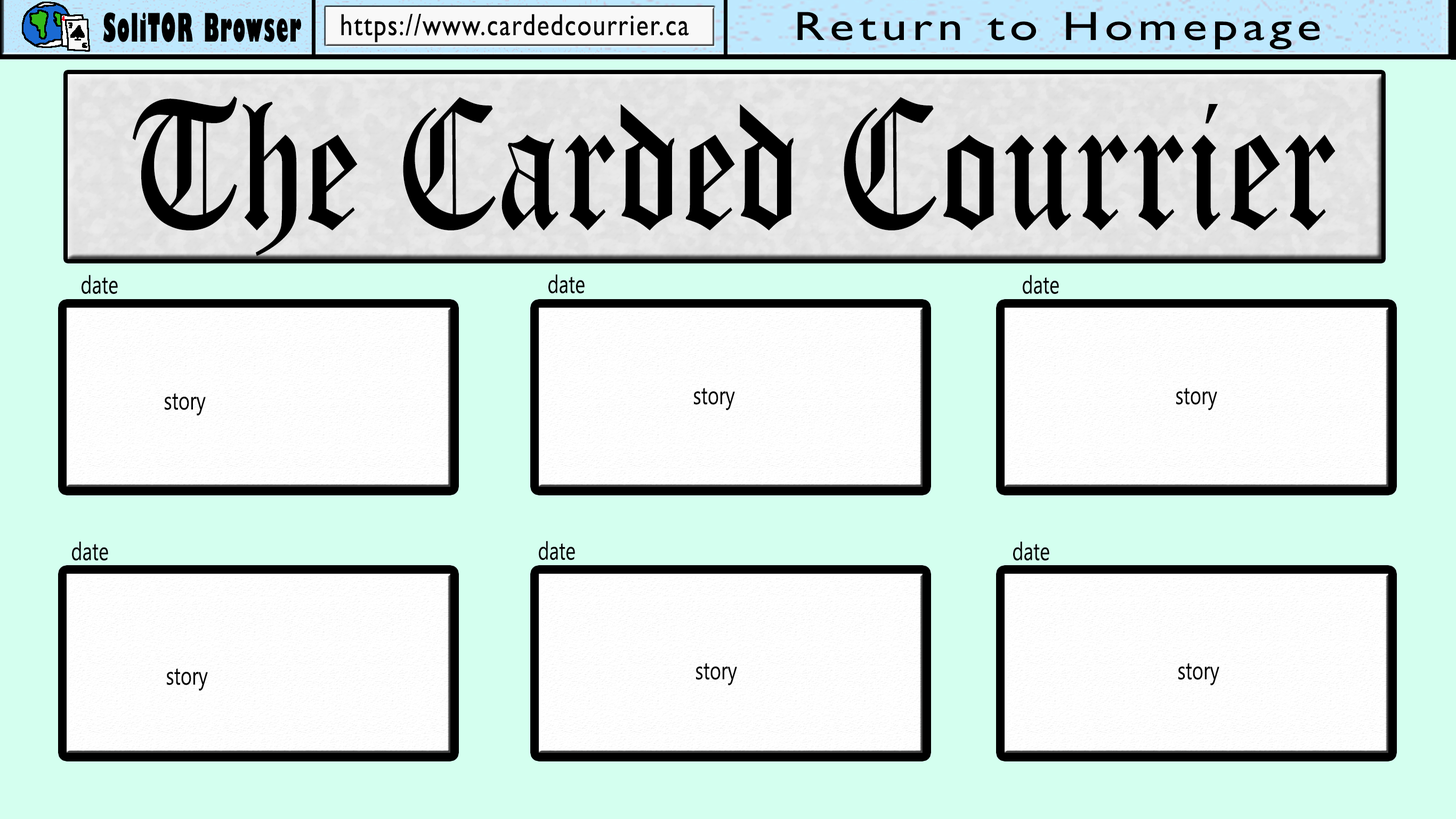
<style>
.page{position:relative;width:1456px;height:819px;background:#d4ffef}
.page>*{position:absolute;margin:0}
.t1{font:38.4px "GillSans-UltraBoldCondensed";letter-spacing:0.05em;color:#000000;scale:0.67 1}
.t2{font:30.7px "GillSansMT";letter-spacing:0.05em;color:#000000;scale:0.83 1}
.t3{font:40.9px "GillSansMT";letter-spacing:0.1em;color:#000000;scale:1.25 1}
.t4{font:183.6px "OldEnglishTextMT";color:#000000;scale:0.77 1}
.t5{font:24.9px "Ebrima";color:#000000;scale:0.77 1}
</style>
<div class="page">
<p class="t1" style="left:103px;top:12px;width:198px;height:30px">SoliTOR Browser</p>
<p class="t2" style="left:341px;top:14px;width:348px;height:29px">https://www.cardedcourrier.ca</p>
<p class="t3" style="left:797px;top:12px;width:523px;height:38px">Return to Homepage</p>
<p class="t4" style="left:132px;top:96px;width:1204px;height:160px">The Carded Courrier</p>
<p class="t5" style="left:82px;top:275px;width:36px;height:19px">date</p>
<p class="t5" style="left:549px;top:274px;width:36px;height:20px">date</p>
<p class="t5" style="left:1023px;top:275px;width:36px;height:19px">date</p>
<p class="t5" style="left:694px;top:388px;width:41px;height:22px">story</p>
<p class="t5" style="left:1176px;top:388px;width:42px;height:22px">story</p>
<p class="t5" style="left:165px;top:393px;width:41px;height:23px">story</p>
<p class="t5" style="left:72px;top:541px;width:36px;height:20px">date</p>
<p class="t5" style="left:539px;top:541px;width:36px;height:19px">date</p>
<p class="t5" style="left:1013px;top:541px;width:37px;height:20px">date</p>
<p class="t5" style="left:696px;top:663px;width:41px;height:23px">story</p>
<p class="t5" style="left:1179px;top:663px;width:41px;height:23px">story</p>
<p class="t5" style="left:167px;top:668px;width:41px;height:23px">story</p>
</div>
